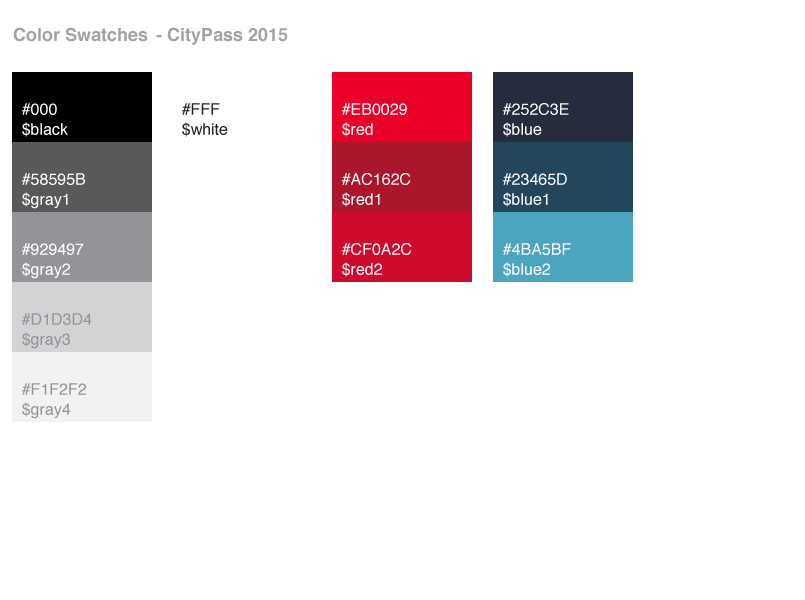
<style>
.page{position:relative;width:805px;height:600px;background:#ffffff}
.page>*{position:absolute;margin:0}
.t1{font:18px "Helvetica-Bold";color:#a2a2a2}
.t2{font:16px/20px "Helvetica";color:#ffffff}
.t3{font:16px/20px "Helvetica";color:#222222}
.t4{font:16px/20px "Helvetica";color:#929497}
</style>
<div class="page">
<p class="t1" style="left:13px;top:27px;width:135px;height:15px">Color Swatches</p>
<p class="t1" style="left:156px;top:27px;width:132px;height:18px">- CityPass 2015</p>
<p class="t2" style="left:21px;top:103px;width:47px;height:34px">#000<br>$black</p>
<p class="t3" style="left:181px;top:103px;width:47px;height:34px">#FFF<br>$white</p>
<p class="t2" style="left:341px;top:103px;width:66px;height:34px">#EB0029<br>$red</p>
<p class="t2" style="left:502px;top:103px;width:67px;height:34px">#252C3E<br>$blue</p>
<p class="t2" style="left:21px;top:173px;width:64px;height:36px">#58595B<br>$gray1</p>
<p class="t2" style="left:341px;top:173px;width:70px;height:34px">#AC162C<br>$red1</p>
<p class="t2" style="left:502px;top:173px;width:65px;height:34px">#23465D<br>$blue1</p>
<p class="t2" style="left:21px;top:243px;width:63px;height:36px">#929497<br>$gray2</p>
<p class="t2" style="left:341px;top:243px;width:71px;height:34px">#CF0A2C<br>$red2</p>
<p class="t2" style="left:502px;top:243px;width:69px;height:34px">#4BA5BF<br>$blue2</p>
<p class="t4" style="left:21px;top:313px;width:71px;height:36px">#D1D3D4<br>$gray3</p>
<p class="t4" style="left:21px;top:383px;width:65px;height:36px">#F1F2F2<br>$gray4</p>
</div>
